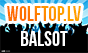
<style>
.page{position:relative;width:88px;height:53px;background:#000000}
.page>*{position:absolute;margin:0}
.t1{font:20.9px "BebasNeue"}
.t2{font:20.9px "BebasNeue";color:#ffffff}
</style>
<div class="page">
<p class="t1" style="left:7px;top:6px;width:74px;height:15px">wolftop.lv</p>
<p class="t2" style="left:21px;top:31px;width:47px;height:15px">balsot</p>
</div>
